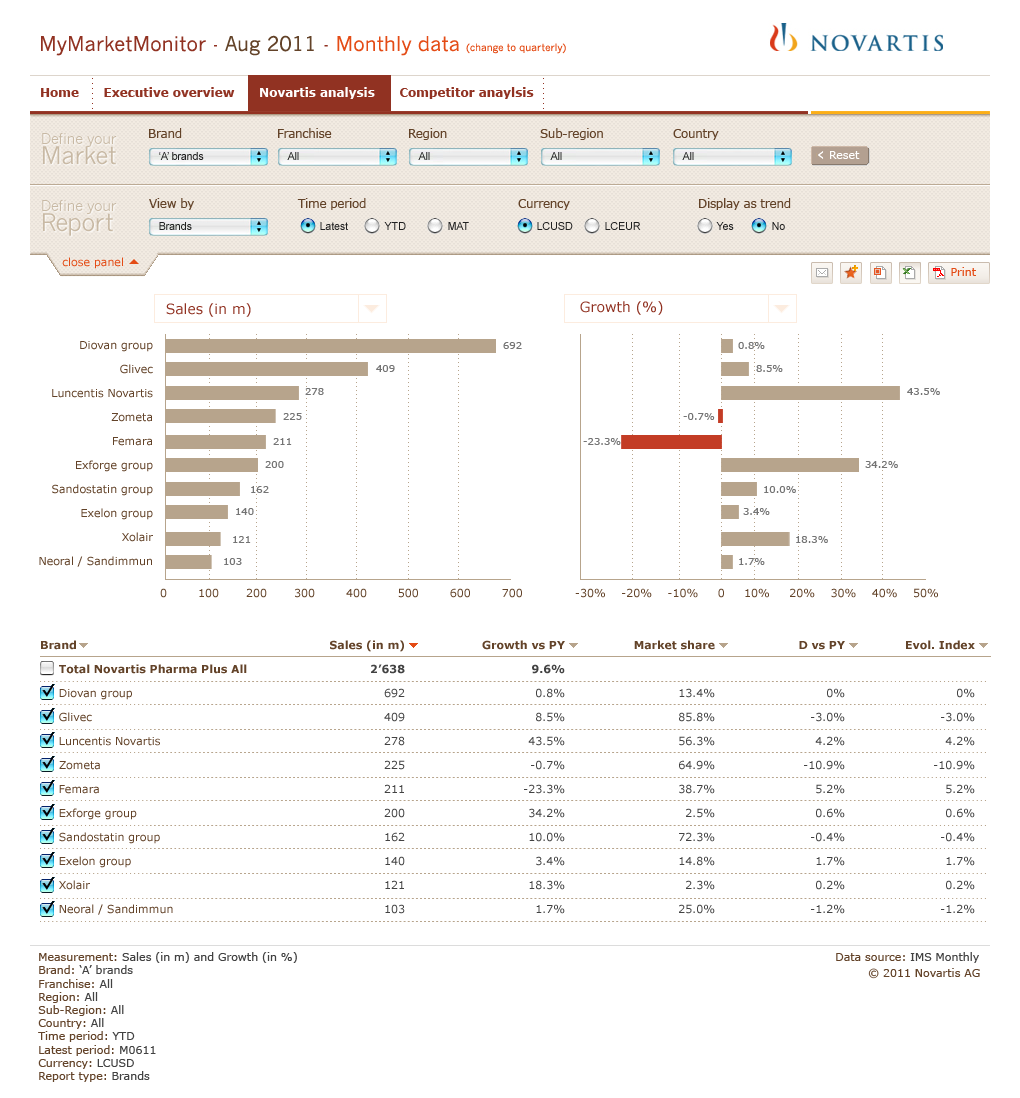
<style>
.page{position:relative;width:1020px;height:1098px;background:#ffffff}
.page>*{position:absolute;margin:0}
.t1{font:10px "NewsGothicMT";color:#e44c16}
.t2{font:20px "NewsGothicMT";color:#913222}
.t3{font:20px "NewsGothicMT";color:#634329}
.t4{font:20px "NewsGothicMT";color:#e44c16}
.t5{font:12px "Verdana-Bold";color:#913222}
.t6{font:12px "Verdana-Bold";color:#fefefe}
.t7{font:14.7px/19.9px "NewsGothicMT";letter-spacing:-0.025em;color:#c8b9a4}
.t8{font:24.1px/19.9px "NewsGothicMT";letter-spacing:-0.025em;color:#c8b9a4}
.t9{font:12px "Verdana";letter-spacing:-0.025em;color:#634329}
.t10{font:11px "ArialMT";letter-spacing:-0.025em;color:#212121}
.t11{font:11px "Verdana";color:#ffffff}
.t12{font:18px "Verdana";color:#ffffff}
.t13{font:11px "Verdana";color:#e44c16}
.t14{font:14px "Verdana";color:#913222}
.t15{font:11px/24px "Verdana";color:#634329}
.t16{font:10px "Verdana";color:#747474}
.t17{font:11px "Verdana";color:#634329}
.t18{font:11px/24px "Verdana-Bold";color:#634329}
.t19{font:11px/24px "Verdana";color:#424242}
.t20{font:11px/24px "Verdana-Bold";color:#424242}
.t21{font:11px "Verdana";color:#424242}
</style>
<div class="page">
<p class="t1" style="left:41px;top:35px;width:525px;height:21px"><span class="t2">MyMarketMonitor - </span><span class="t3">Aug 2011</span><span class="t2"> - </span><span class="t4">Monthly data </span>(change to quarterly)</p>
<p class="t5" style="left:41px;top:87px;width:493px;height:12px">Home      Executive overview      <span class="t6">Novartis analysis</span>      Competitor anaylsis</p>
<p class="t7" style="left:42px;top:133px;width:75px;height:32px">Define your<br><span class="t8">Market</span></p>
<p class="t9" style="left:149px;top:128px;width:33px;height:10px">Brand</p>
<p class="t9" style="left:278px;top:128px;width:54px;height:10px">Franchise</p>
<p class="t9" style="left:409px;top:128px;width:38px;height:12px">Region</p>
<p class="t9" style="left:540px;top:128px;width:63px;height:12px">Sub-region</p>
<p class="t9" style="left:673px;top:129px;width:46px;height:11px">Country</p>
<p class="t10" style="left:159px;top:152px;width:45px;height:8px">‘A’ brands</p>
<p class="t10" style="left:287px;top:152px;width:12px;height:8px">All</p>
<p class="t10" style="left:418px;top:152px;width:12px;height:8px">All</p>
<p class="t10" style="left:550px;top:152px;width:12px;height:8px">All</p>
<p class="t10" style="left:682px;top:152px;width:12px;height:8px">All</p>
<p class="t11" style="left:818px;top:151px;width:42px;height:8px"><span class="t12">‹ </span>Reset</p>
<p class="t9" style="left:149px;top:198px;width:45px;height:12px">View by</p>
<p class="t9" style="left:297px;top:198px;width:69px;height:12px">Time period</p>
<p class="t9" style="left:699px;top:198px;width:92px;height:12px">Display as trend</p>
<p class="t7" style="left:42px;top:200px;width:75px;height:36px">Define your<br><span class="t8">Report</span></p>
<p class="t9" style="left:518px;top:199px;width:52px;height:11px">Currency</p>
<p class="t10" style="left:159px;top:222px;width:33px;height:8px">Brands</p>
<p class="t10" style="left:320px;top:222px;width:28px;height:8px">Latest</p>
<p class="t10" style="left:384px;top:222px;width:22px;height:8px">YTD</p>
<p class="t10" style="left:448px;top:222px;width:21px;height:8px">MAT</p>
<p class="t10" style="left:537px;top:222px;width:36px;height:8px">LCUSD</p>
<p class="t10" style="left:605px;top:222px;width:36px;height:8px">LCEUR</p>
<p class="t10" style="left:716px;top:222px;width:18px;height:8px">Yes</p>
<p class="t10" style="left:772px;top:222px;width:13px;height:8px">No</p>
<p class="t13" style="left:62px;top:257px;width:61px;height:12px">close panel</p>
<p class="t13" style="left:951px;top:267px;width:25px;height:9px">Print</p>
<p class="t14" style="left:166px;top:303px;width:85px;height:14px">Sales (in m)</p>
<p class="t14" style="left:580px;top:301px;width:83px;height:14px">Growth (%)</p>
<p class="t15" style="left:39px;top:341px;width:114px;height:226px;text-align:right">Diovan group<br>Glivec<br>Luncentis Novartis<br>Zometa<br>Femara<br>Exforge group<br>Sandostatin group<br>Exelon group<br>Xolair<br>Neoral / Sandimmun</p>
<p class="t16" style="left:503px;top:342px;width:19px;height:7px">692</p>
<p class="t16" style="left:738px;top:342px;width:27px;height:7px">0.8%</p>
<p class="t16" style="left:376px;top:365px;width:19px;height:7px">409</p>
<p class="t16" style="left:756px;top:365px;width:27px;height:7px">8.5%</p>
<p class="t16" style="left:305px;top:388px;width:19px;height:7px">278</p>
<p class="t16" style="left:907px;top:388px;width:33px;height:7px">43.5%</p>
<p class="t16" style="left:283px;top:413px;width:19px;height:7px">225</p>
<p class="t16" style="left:683px;top:413px;width:32px;height:7px">-0.7%</p>
<p class="t16" style="left:273px;top:438px;width:19px;height:7px">211</p>
<p class="t16" style="left:583px;top:438px;width:38px;height:7px">-23.3%</p>
<p class="t16" style="left:265px;top:461px;width:19px;height:7px">200</p>
<p class="t16" style="left:865px;top:461px;width:33px;height:7px">34.2%</p>
<p class="t16" style="left:251px;top:486px;width:18px;height:7px">162</p>
<p class="t16" style="left:764px;top:486px;width:32px;height:7px">10.0%</p>
<p class="t16" style="left:236px;top:508px;width:18px;height:7px">140</p>
<p class="t16" style="left:743px;top:508px;width:27px;height:7px">3.4%</p>
<p class="t16" style="left:233px;top:536px;width:18px;height:7px">121</p>
<p class="t16" style="left:796px;top:536px;width:32px;height:7px">18.3%</p>
<p class="t16" style="left:224px;top:558px;width:18px;height:7px">103</p>
<p class="t16" style="left:739px;top:558px;width:26px;height:7px">1.7%</p>
<p class="t17" style="left:160px;top:588px;width:362px;height:10px">0        100       200       300        400        500        600        700</p>
<p class="t17" style="left:575px;top:588px;width:363px;height:10px">-30%    -20%    -10%     0     10%     20%    30%    40%    50%</p>
<p class="t15" style="left:41px;top:640px;width:206px;height:275px"><span class="t18">Brand<br>     Total Novartis Pharma Plus All<br>     </span>Diovan group<br>     Glivec<br>     Luncentis Novartis<br>     Zometa<br>     Femara<br>     Exforge group<br>     Sandostatin group<br>     Exelon group<br>     Xolair<br>     Neoral / Sandimmun</p>
<p class="t19" style="left:330px;top:640px;width:75px;height:274px;text-align:right"><span class="t18">Sales (in m)<br></span><span class="t20">2’638<br></span>692<br>409<br>278<br>225<br>211<br>200<br>162<br>140<br>121<br>103</p>
<p class="t19" style="left:482px;top:640px;width:83px;height:274px;text-align:right"><span class="t18">Growth vs PY<br></span><span class="t20">9.6%<br></span>0.8%<br>8.5%<br>43.5%<br>-0.7%<br>-23.3%<br>34.2%<br>10.0%<br>3.4%<br>18.3%<br>1.7%</p>
<p class="t19" style="left:634px;top:640px;width:81px;height:274px;text-align:right"><span class="t18">Market share<br></span><br>13.4%<br>85.8%<br>56.3%<br>64.9%<br>38.7%<br>2.5%<br>72.3%<br>14.8%<br>2.3%<br>25.0%</p>
<p class="t19" style="left:799px;top:641px;width:46px;height:273px;text-align:right"><span class="t18">D vs PY<br><br></span>0%<br>-3.0%<br>4.2%<br>-10.9%<br>5.2%<br>0.6%<br>-0.4%<br>1.7%<br>0.2%<br>-1.2%</p>
<p class="t19" style="left:906px;top:640px;width:69px;height:274px;text-align:right"><span class="t18">Evol. Index<br><br></span>0%<br>-3.0%<br>4.2%<br>-10.9%<br>5.2%<br>0.6%<br>-0.4%<br>1.7%<br>0.2%<br>-1.2%</p>
<p class="t21" style="left:38px;top:952px;width:259px;height:130px"><span class="t17">Measurement: </span>Sales (in m) and Growth (in %)<br><span class="t17">Brand: </span>‘A’ brands<br><span class="t17">Franchise: </span>All<br><span class="t17">Region: </span>All<br><span class="t17">Sub-Region: </span>All<br><span class="t17">Country: </span>All<br><span class="t17">Time period: </span>YTD<br><span class="t17">Latest period: </span>M0611<br><span class="t17">Currency: </span>LCUSD<br><span class="t17">Report type: </span>Brands</p>
<p class="t17" style="left:836px;top:952px;width:143px;height:11px">Data source: <span class="t21">IMS Monthly</span></p>
<p class="t17" style="left:868px;top:968px;width:112px;height:11px">© 2011 Novartis AG</p>
</div>
